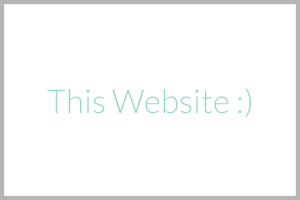
<style>
.page{position:relative;width:300px;height:200px;background:#ffffff}
.page>*{position:absolute;margin:0}
.t1{font:32.7px "Lato-Light";color:#9ad8d0}
</style>
<div class="page">
<p class="t1" style="left:47px;top:88px;width:204px;height:30px">This Website :)</p>
</div>
